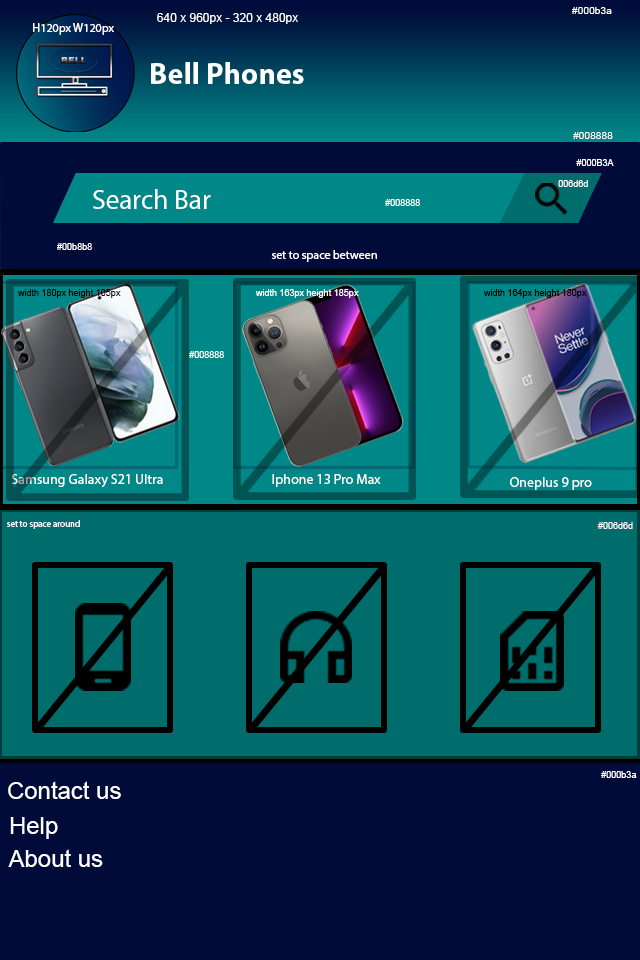
<style>
.page{position:relative;width:640px;height:960px;background:#000b3a}
.page>*{position:absolute;margin:0}
.t1{font:12px "ArialMT";color:#ffffff}
.t2{font:10.2px "ArialMT";color:#ffffff}
.t3{font:12px "MyriadPro-Regular";color:#ffffff}
.t4{font:30px "MyriadPro-Bold";color:#ffffff}
.t5{font:9px "ArialMT";color:#ffffff}
.t6{font:27.3px "MyriadPro-Regular";color:#ffffff}
.t7{font:9px "ArialMT";color:#000000}
.t8{font:10.2px "ArialMT";color:#000000}
.t9{font:14px "MyriadPro-Regular";color:#ffffff}
.t10{font:9px "MyriadPro-Regular";color:#ffffff}
.t11{font:23.9px "ArialMT";color:#ffffff}
</style>
<div class="page">
<p class="t1" style="left:157px;top:13px;width:141px;height:11px">640 x 960px - 320 x 480px</p>
<p class="t2" style="left:572px;top:7px;width:40px;height:7px">#000b3a</p>
<p class="t3" style="left:33px;top:23px;width:81px;height:12px">H120px W120px</p>
<p class="t4" style="left:151px;top:62px;width:153px;height:22px">Bell Phones</p>
<p class="t2" style="left:573px;top:132px;width:40px;height:7px">#008888</p>
<p class="t5" style="left:576px;top:159px;width:38px;height:7px">#000B3A</p>
<p class="t5" style="left:558px;top:180px;width:30px;height:7px">006d6d</p>
<p class="t6" style="left:93px;top:189px;width:118px;height:20px">Search Bar</p>
<p class="t5" style="left:385px;top:199px;width:35px;height:7px">#008888</p>
<p class="t5" style="left:57px;top:243px;width:35px;height:7px">#00b8b8</p>
<p class="t3" style="left:271px;top:250px;width:106px;height:12px">set to space between</p>
<p class="t7" style="left:18px;top:289px;width:103px;height:9px">width 180px height 105p<span class="t8">x</span></p>
<p class="t5" style="left:256px;top:289px;width:103px;height:9px">width 163px height 185p<span class="t2">x</span></p>
<p class="t7" style="left:484px;top:289px;width:103px;height:9px">width 164px height 180p<span class="t8">x</span></p>
<p class="t5" style="left:189px;top:351px;width:35px;height:7px">#008888</p>
<p class="t9" style="left:11px;top:474px;width:152px;height:14px">Samsung Galaxy S21 Ultra</p>
<p class="t9" style="left:272px;top:474px;width:109px;height:13px">Iphone 13 Pro Max</p>
<p class="t9" style="left:510px;top:477px;width:82px;height:13px">Oneplus 9 pro</p>
<p class="t10" style="left:7px;top:520px;width:73px;height:9px">set to space around</p>
<p class="t5" style="left:597px;top:522px;width:36px;height:7px">#006d6d</p>
<p class="t5" style="left:601px;top:771px;width:36px;height:7px">#000b3a</p>
<p class="t11" style="left:8px;top:781px;width:113px;height:18px">Contact us</p>
<p class="t11" style="left:10px;top:817px;width:48px;height:22px">Help</p>
<p class="t11" style="left:8px;top:849px;width:95px;height:18px">About us</p>
</div>
